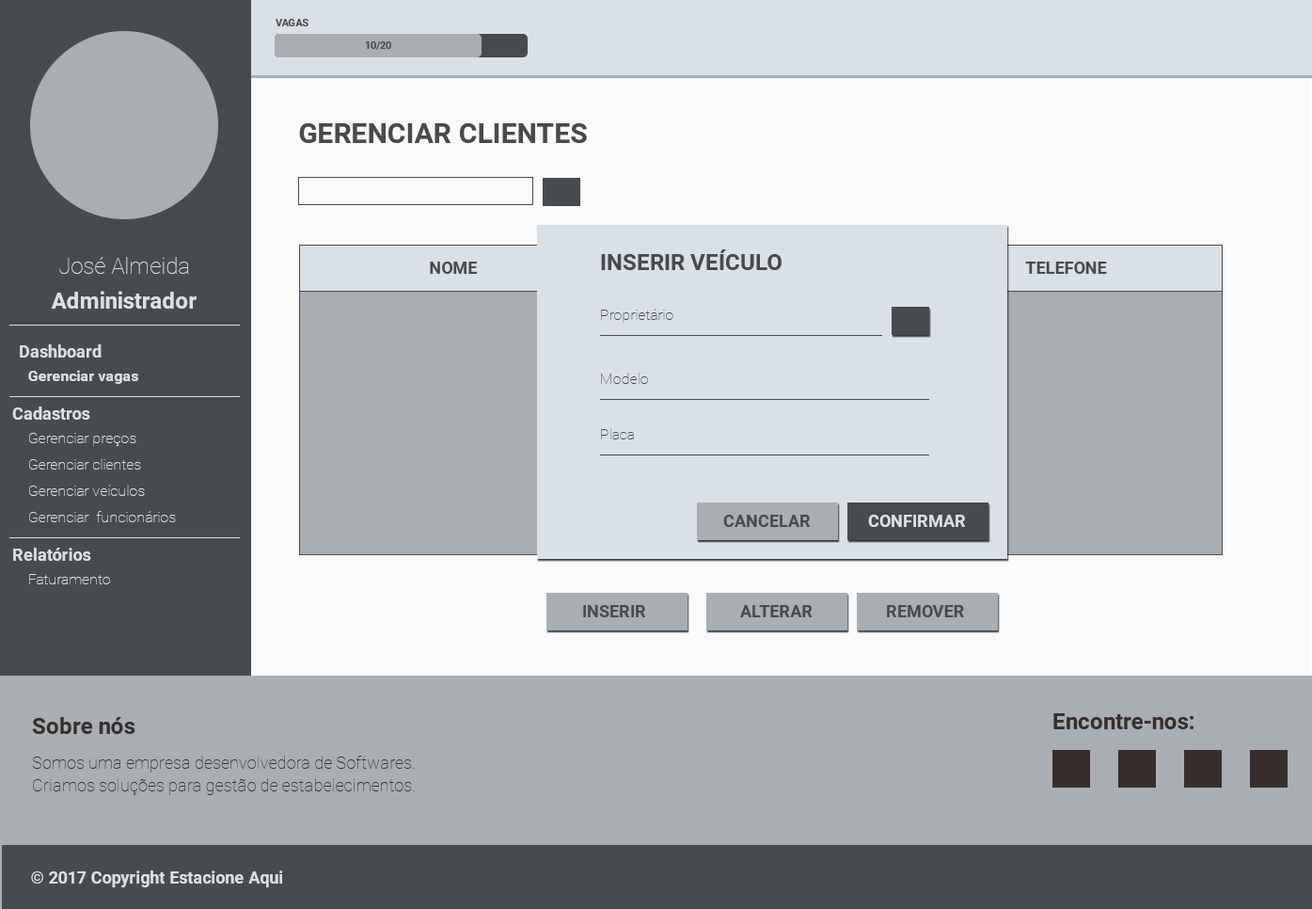
<style>
.page{position:relative;width:1312px;height:909px;background:#a9aeb3}
.page>*{position:absolute;margin:0}
.t1{font:10.3px "Roboto-Bold";color:#484b4d;text-transform:uppercase}
.t2{font:10.3px "Roboto-Bold";color:#484b4d}
.t3{font:28.2px "Roboto-Bold";color:#484b4d;text-transform:uppercase}
.t4{font:22.6px "Roboto-Thin";color:#d9e0e6}
.t5{font:22.6px "Roboto-Bold";color:#484b4d;text-transform:uppercase}
.t6{font:16.9px "Roboto-Bold";color:#484b4d;text-transform:uppercase}
.t7{font:22.6px "Roboto-Bold";color:#d9e0e6}
.t8{font:15.1px "Roboto-Thin";color:#484b4d}
.t9{font:16.9px "Roboto-Bold";color:#d9e0e6}
.t10{font:15.1px "Roboto-Bold";color:#d9e0e6}
.t11{font:15.1px "Roboto-Thin";color:#d9e0e6}
.t12{font:16.9px "Roboto-Bold";color:#d9e0e6;text-transform:uppercase}
.t13{font:22.6px "Roboto-Bold";color:#362f2d}
.t14{font:16.9px/22.6px "Roboto-Thin";color:#362f2d}
</style>
<div class="page">
<p class="t1" style="left:276px;top:19px;width:33px;height:7px">Vagas</p>
<p class="t2" style="left:365px;top:41px;width:26px;height:9px">10/20</p>
<p class="t3" style="left:299px;top:123px;width:288px;height:20px">gerenciar clientes</p>
<p class="t4" style="left:59px;top:257px;width:130px;height:17px">José Almeida</p>
<p class="t5" style="left:601px;top:249px;width:181px;height:21px">inserir veículo</p>
<p class="t6" style="left:430px;top:262px;width:47px;height:12px">nOME</p>
<p class="t6" style="left:1025px;top:262px;width:82px;height:12px">TELEFONE</p>
<p class="t7" style="left:51px;top:291px;width:146px;height:18px">Administrador</p>
<p class="t8" style="left:601px;top:309px;width:73px;height:14px">Proprietário</p>
<p class="t9" style="left:20px;top:344px;width:82px;height:13px">Dashboard</p>
<p class="t10" style="left:28px;top:370px;width:110px;height:14px">Gerenciar vagas</p>
<p class="t8" style="left:601px;top:373px;width:47px;height:11px">Modelo</p>
<p class="t9" style="left:12px;top:406px;width:78px;height:14px">Cadastros</p>
<p class="t11" style="left:29px;top:433px;width:107px;height:13px">Gerenciar preços</p>
<p class="t8" style="left:601px;top:428px;width:33px;height:11px">Placa</p>
<p class="t11" style="left:29px;top:458px;width:112px;height:11px">Gerenciar clientes</p>
<p class="t11" style="left:29px;top:484px;width:116px;height:12px">Gerenciar veículos</p>
<p class="t11" style="left:29px;top:511px;width:147px;height:11px">Gerenciar  funcionários</p>
<p class="t6" style="left:723px;top:515px;width:87px;height:12px">CancelaR</p>
<p class="t12" style="left:868px;top:515px;width:97px;height:12px">Confirmar</p>
<p class="t9" style="left:13px;top:547px;width:78px;height:14px">Relatórios</p>
<p class="t11" style="left:29px;top:574px;width:81px;height:10px">Faturamento</p>
<p class="t6" style="left:583px;top:605px;width:62px;height:12px">INSERIR</p>
<p class="t6" style="left:740px;top:605px;width:73px;height:12px">ALTERAR</p>
<p class="t6" style="left:887px;top:605px;width:77px;height:12px">REMOVER</p>
<p class="t13" style="left:1054px;top:713px;width:140px;height:16px">Encontre-nos:</p>
<p class="t13" style="left:32px;top:717px;width:103px;height:17px">Sobre nós</p>
<p class="t14" style="left:32px;top:755px;width:383px;height:40px">Somos uma empresa desenvolvedora de Softwares. Criamos soluções para gestão de estabelecimentos.</p>
<p class="t9" style="left:31px;top:870px;width:252px;height:17px">© 2017 Copyright Estacione Aqui</p>
</div>
